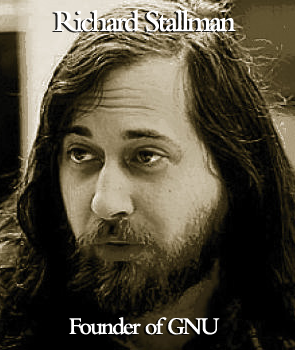
<style>
.page{position:relative;width:295px;height:350px}
.page>*{position:absolute;margin:0}
.t1{font:31.2px "BemboMT-SemiBold";letter-spacing:-0.08em;color:#ffffff;scale:0.95 1}
.t2{font:25px "BemboMT-SemiBold";letter-spacing:-0.08em;color:#ffffff;scale:0.95 1}
</style>
<div class="page">
<p class="t1" style="left:54px;top:10px;width:182px;height:22px">Richard Stallman</p>
<p class="t2" style="left:69px;top:317px;width:151px;height:18px">Founder of GNU</p>
</div>
